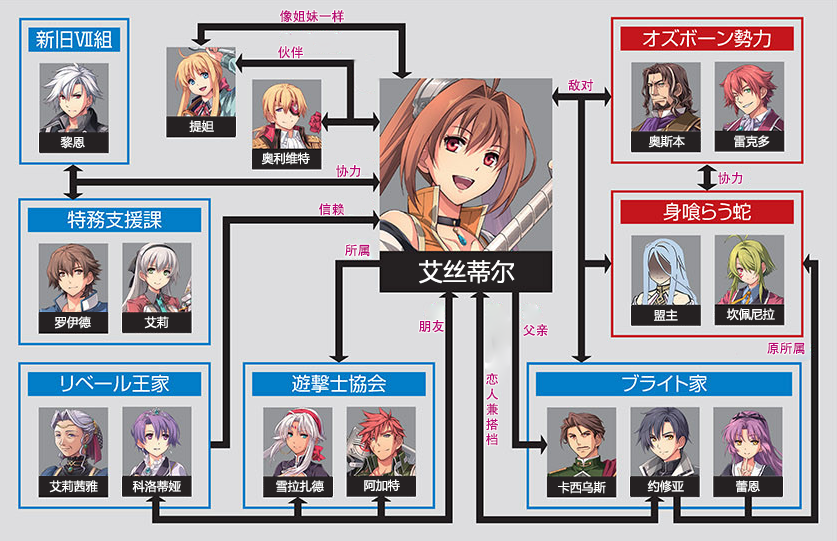
<style>
.page{position:relative;width:837px;height:541px;background:#dddddf}
.page>*{position:absolute;margin:0}
.t1{font:13px "AdobeHeitiStd-Regular";color:#b70773}
.t2{font:12px "MicrosoftYaHei";color:#ffffff}
.t3{font:24px "MicrosoftYaHei";color:#ffffff}
.t4{font:13px/15px "AdobeHeitiStd-Regular";color:#b70773}
</style>
<div class="page">
<p class="t1" style="left:280px;top:10px;width:64px;height:13px">像姐妹一样</p>
<p class="t1" style="left:278px;top:46px;width:25px;height:13px">伙伴</p>
<p class="t1" style="left:568px;top:79px;width:26px;height:13px">敌对</p>
<p class="t2" style="left:189px;top:120px;width:25px;height:13px">提妲</p>
<p class="t2" style="left:60px;top:136px;width:25px;height:13px">黎恩</p>
<p class="t2" style="left:648px;top:135px;width:37px;height:13px">奥斯本</p>
<p class="t2" style="left:734px;top:135px;width:36px;height:13px">雷克多</p>
<p class="t2" style="left:261px;top:152px;width:49px;height:13px">奥利维特</p>
<p class="t1" style="left:336px;top:165px;width:25px;height:13px">协力</p>
<p class="t1" style="left:718px;top:172px;width:25px;height:13px">协力</p>
<p class="t1" style="left:318px;top:203px;width:27px;height:13px">信赖</p>
<p class="t1" style="left:345px;top:244px;width:25px;height:13px">所属</p>
<p class="t3" style="left:419px;top:260px;width:96px;height:24px">艾丝蒂尔</p>
<p class="t2" style="left:54px;top:316px;width:37px;height:13px">罗伊德</p>
<p class="t2" style="left:144px;top:316px;width:25px;height:13px">艾莉</p>
<p class="t2" style="left:654px;top:309px;width:24px;height:12px">盟主</p>
<p class="t2" style="left:726px;top:308px;width:49px;height:13px">坎佩尼拉</p>
<p class="t1" style="left:419px;top:320px;width:25px;height:13px">朋友</p>
<p class="t1" style="left:523px;top:324px;width:25px;height:13px">父亲</p>
<p class="t1" style="left:767px;top:342px;width:38px;height:13px">原所属</p>
<p class="t4" style="left:486px;top:373px;width:13px;height:73px">恋<br>人<br>兼<br>搭<br>档</p>
<p class="t2" style="left:49px;top:480px;width:49px;height:13px">艾莉茜雅</p>
<p class="t2" style="left:132px;top:480px;width:49px;height:13px">科洛蒂娅</p>
<p class="t2" style="left:276px;top:480px;width:48px;height:13px">雪拉扎德</p>
<p class="t2" style="left:364px;top:479px;width:36px;height:13px">阿加特</p>
<p class="t2" style="left:558px;top:481px;width:48px;height:13px">卡西乌斯</p>
<p class="t2" style="left:647px;top:480px;width:37px;height:13px">约修亚</p>
<p class="t2" style="left:736px;top:480px;width:24px;height:13px">蕾恩</p>
</div>
